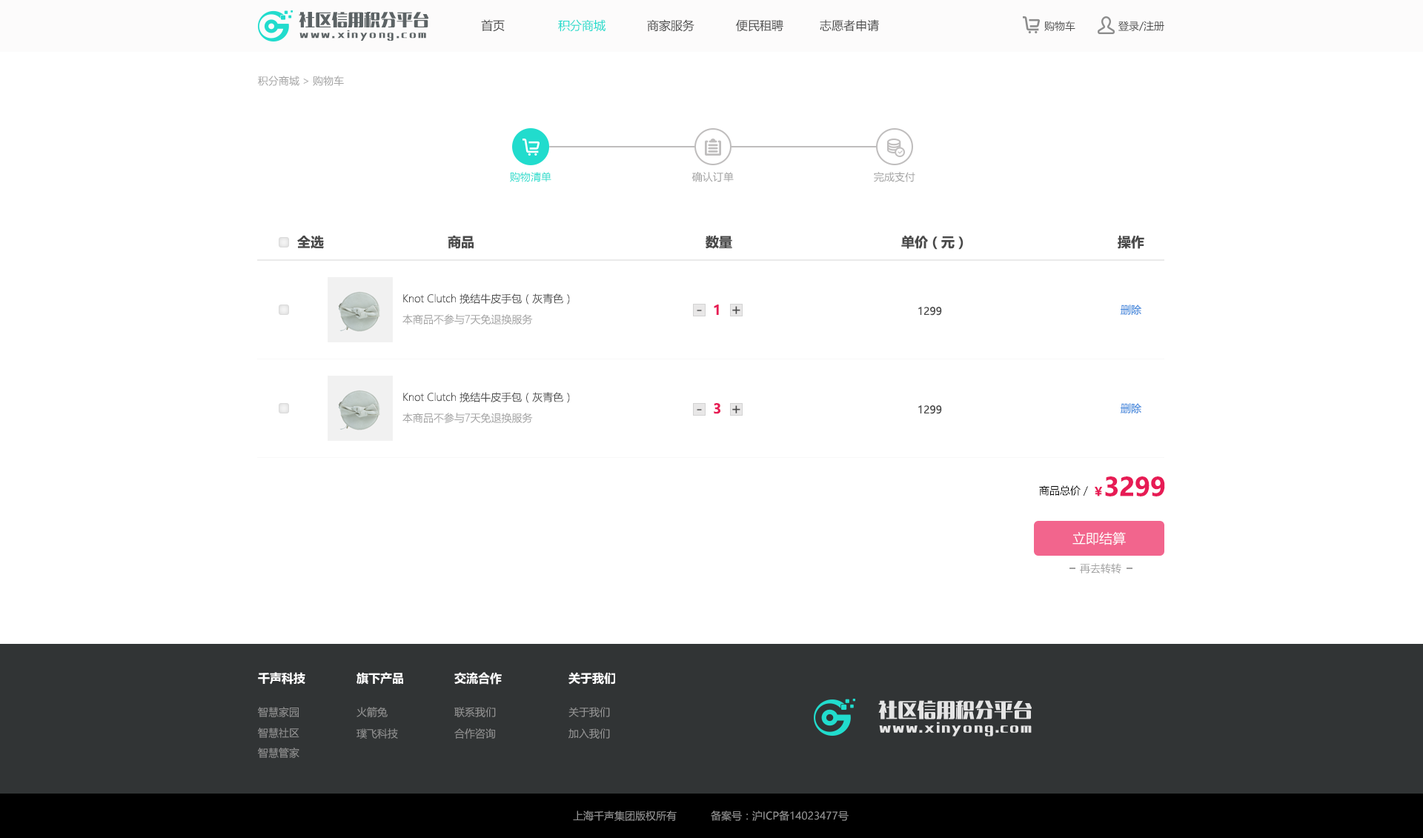
<style>
.page{position:relative;width:1423px;height:838px;background:#ffffff}
.page>*{position:absolute;margin:0}
.t1{font:16.3px "MFLangQian_Noncommercial-Bold";color:#5c6365}
.t2{font:8.9px "MFLangQian_Noncommercial-Bold";letter-spacing:0.22em;color:#5c6365}
.t3{font:11.9px "MicrosoftYaHei";color:#4a4a4a}
.t4{font:11.9px "MicrosoftYaHei";color:#21dccd}
.t5{font:10.4px "MicrosoftYaHei";color:#4a4a4a}
.t6{font:10.4px "MicrosoftYaHeiLight";color:#a2a2a2}
.t7{font:10.4px "MicrosoftYaHei";letter-spacing:0.005em;color:#21dccd}
.t8{font:10.4px "MicrosoftYaHei";letter-spacing:0.005em;color:#a1a1a1}
.t9{font:13.3px "MicrosoftYaHei-Bold";color:#4a4a4a}
.t10{font:10.4px "MicrosoftYaHeiLight";color:#4a4a4a}
.t11{font:13.3px "MicrosoftYaHei-Bold";color:#e71b55}
.t12{font:10.4px "MicrosoftYaHei";color:#5291de}
.t13{font:10.4px "MicrosoftYaHeiLight";color:#a1a1a1}
.t14{font:14.8px "MicrosoftYaHei"}
.t15{font:14.8px "MicrosoftYaHei";color:#4a4a4a}
.t16{font:10.4px "MicrosoftYaHeiLight";color:#000000}
.t17{font:25.2px "MicrosoftYaHei-Bold";color:#e71b55}
.t18{font:11.9px "MicrosoftYaHei-Bold";color:#e71b55}
.t19{font:13.3px "MicrosoftYaHeiLight";color:#ffffff}
.t20{font:11.9px "MicrosoftYaHei-Bold";color:#ffffff}
.t21{font:19.3px "MFLangQian_Noncommercial-Bold";color:#e5e5e5}
.t22{font:10.4px "MicrosoftYaHei";color:#929292}
.t23{font:11.9px "MFLangQian_Noncommercial-Bold";letter-spacing:0.12em;color:#e5e5e5}
</style>
<div class="page">
<p class="t1" style="left:299px;top:12px;width:130px;height:15px">社区信用积分平台</p>
<p class="t2" style="left:299px;top:30px;width:127px;height:11px">www.xinyong.com</p>
<p class="t3" style="left:481px;top:19px;width:24px;height:13px">首页</p>
<p class="t4" style="left:558px;top:19px;width:47px;height:13px">积分商城</p>
<p class="t3" style="left:647px;top:19px;width:47px;height:13px">商家服务</p>
<p class="t3" style="left:736px;top:19px;width:47px;height:13px">便民租聘</p>
<p class="t3" style="left:820px;top:19px;width:59px;height:13px">志愿者申请</p>
<p class="t5" style="left:1044px;top:21px;width:31px;height:10px">购物车</p>
<p class="t5" style="left:1118px;top:21px;width:46px;height:10px">登录/注册</p>
<p class="t6" style="left:258px;top:76px;width:86px;height:10px">积分商城 &gt; 购物车</p>
<p class="t7" style="left:510px;top:172px;width:41px;height:10px">购物清单</p>
<p class="t8" style="left:691px;top:172px;width:43px;height:10px">确认订单</p>
<p class="t8" style="left:874px;top:172px;width:41px;height:10px">完成支付</p>
<p class="t9" style="left:297px;top:236px;width:27px;height:13px">全选</p>
<p class="t9" style="left:448px;top:235px;width:26px;height:14px">商品</p>
<p class="t9" style="left:705px;top:235px;width:27px;height:14px">数量</p>
<p class="t9" style="left:901px;top:235px;width:62px;height:15px">单价（元）</p>
<p class="t9" style="left:1117px;top:236px;width:27px;height:13px">操作</p>
<p class="t10" style="left:403px;top:293px;width:167px;height:12px">Knot Clutch 挽结牛皮手包（灰青色）</p>
<p class="t11" style="left:714px;top:305px;width:5px;height:10px">1</p>
<p class="t12" style="left:1120px;top:305px;width:21px;height:10px">删除</p>
<p class="t13" style="left:402px;top:314px;width:131px;height:11px">本商品不参与7天免退换服务</p>
<p class="t14" style="left:697px;top:310px;width:5px;height:1px">-</p>
<p class="t15" style="left:732px;top:306px;width:8px;height:8px">+</p>
<p class="t5" style="left:918px;top:307px;width:24px;height:9px">1299</p>
<p class="t10" style="left:403px;top:392px;width:167px;height:11px">Knot Clutch 挽结牛皮手包（灰青色）</p>
<p class="t13" style="left:402px;top:413px;width:131px;height:10px">本商品不参与7天免退换服务</p>
<p class="t14" style="left:697px;top:409px;width:5px;height:2px">-</p>
<p class="t11" style="left:714px;top:403px;width:6px;height:11px">3</p>
<p class="t15" style="left:732px;top:405px;width:8px;height:8px">+</p>
<p class="t5" style="left:918px;top:405px;width:24px;height:9px">1299</p>
<p class="t12" style="left:1120px;top:403px;width:21px;height:10px">删除</p>
<p class="t16" style="left:1039px;top:485px;width:49px;height:11px">商品总价 /</p>
<p class="t17" style="left:1105px;top:476px;width:60px;height:20px">3299</p>
<p class="t18" style="left:1094px;top:487px;width:8px;height:9px">￥</p>
<p class="t19" style="left:1072px;top:532px;width:54px;height:13px">立即结算</p>
<p class="t13" style="left:1080px;top:563px;width:41px;height:11px">再去转转</p>
<p class="t20" style="left:258px;top:672px;width:47px;height:13px">千声科技</p>
<p class="t20" style="left:356px;top:672px;width:47px;height:13px">旗下产品</p>
<p class="t20" style="left:454px;top:672px;width:48px;height:13px">交流合作</p>
<p class="t20" style="left:568px;top:672px;width:47px;height:13px">关于我们</p>
<p class="t21" style="left:878px;top:700px;width:154px;height:20px">社区信用积分平台</p>
<p class="t22" style="left:258px;top:707px;width:41px;height:10px">智慧家园</p>
<p class="t22" style="left:356px;top:707px;width:32px;height:10px">火箭兔</p>
<p class="t22" style="left:454px;top:707px;width:42px;height:10px">联系我们</p>
<p class="t22" style="left:568px;top:707px;width:42px;height:10px">关于我们</p>
<p class="t23" style="left:879px;top:722px;width:153px;height:15px">www.xinyong.com</p>
<p class="t22" style="left:258px;top:728px;width:41px;height:10px">智慧社区</p>
<p class="t22" style="left:356px;top:728px;width:42px;height:11px">璞飞科技</p>
<p class="t22" style="left:454px;top:728px;width:42px;height:11px">合作咨询</p>
<p class="t22" style="left:568px;top:728px;width:42px;height:11px">加入我们</p>
<p class="t22" style="left:258px;top:748px;width:41px;height:10px">智慧管家</p>
<p class="t22" style="left:573px;top:811px;width:104px;height:10px">上海千声集团版权所有</p>
<p class="t22" style="left:711px;top:811px;width:137px;height:10px">备案号：沪ICP备14023477号</p>
</div>
